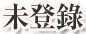
<style>
.page{position:relative;width:86px;height:34px;background:#fff6f2}
.page>*{position:absolute;margin:0}
.t1{font:28px "RyuminPr6N-ExBold";letter-spacing:-0.05em;color:#333333}
</style>
<div class="page">
<p class="t1" style="left:2px;top:3px;width:81px;height:27px">未登錄</p>
</div>
